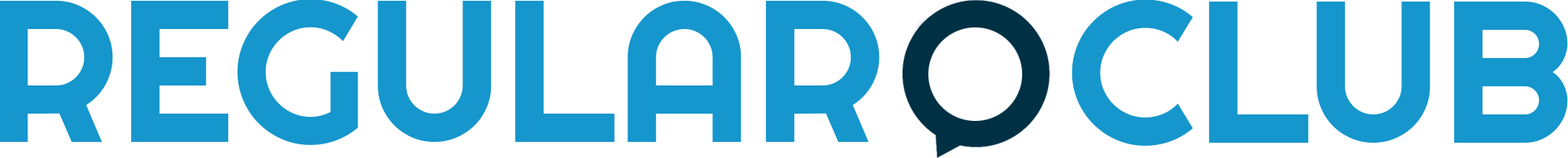
<style>
.page{position:relative;width:1568px;height:158px;background:#ffffff}
.page>*{position:absolute;margin:0}
.t1{font:202.2px "Righteous-Regular";color:#1596cc}
</style>
<div class="page">
<p class="t1" style="left:0px;top:0px;width:880px;height:146px">REGULAR</p>
<p class="t1" style="left:1071px;top:0px;width:497px;height:146px">CLUB</p>
</div>
